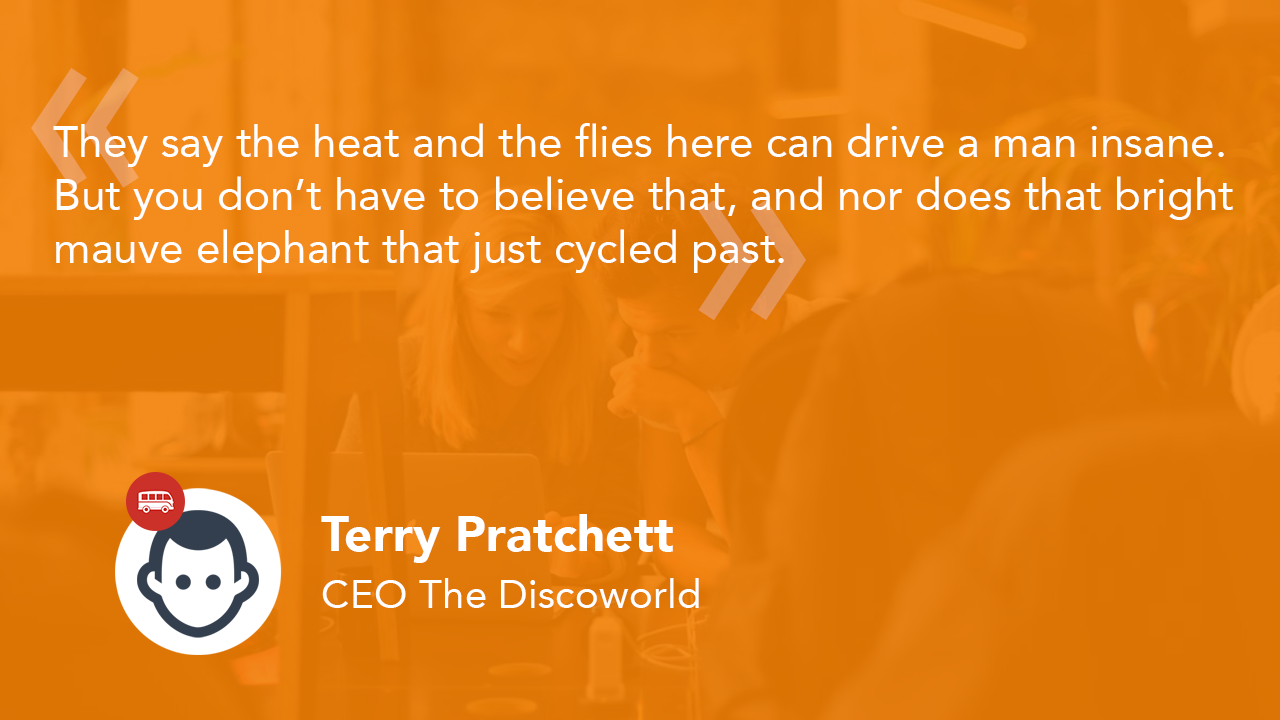
<style>
.page{position:relative;width:1280px;height:720px}
.page>*{position:absolute;margin:0}
.t1{font:279.6px "Avenir-Roman";color:#ec9b57}
.t2{font:44px "Avenir-Roman";color:#ffffff}
.t3{font:279.6px "Avenir-Roman";color:#e39355}
.t4{font:49.4px "Avenir-Black";color:#ffffff}
.t5{font:40.4px "Avenir-Roman";color:#ffffff}
</style>
<div class="page">
<p class="t1" style="left:31px;top:67px;width:108px;height:121px">«</p>
<p class="t2" style="left:53px;top:123px;width:1180px;height:150px">They say the heat and the flies here can drive a man insane. <br>But you don’t have to believe that, and nor does that bright <br>mauve elephant that just cycled past.</p>
<p class="t3" style="left:698px;top:200px;width:109px;height:121px;rotate:180deg">«</p>
<p class="t4" style="left:321px;top:514px;width:352px;height:49px">Terry Pratchett</p>
<p class="t5" style="left:322px;top:578px;width:377px;height:30px">CEO The Discoworld</p>
</div>
